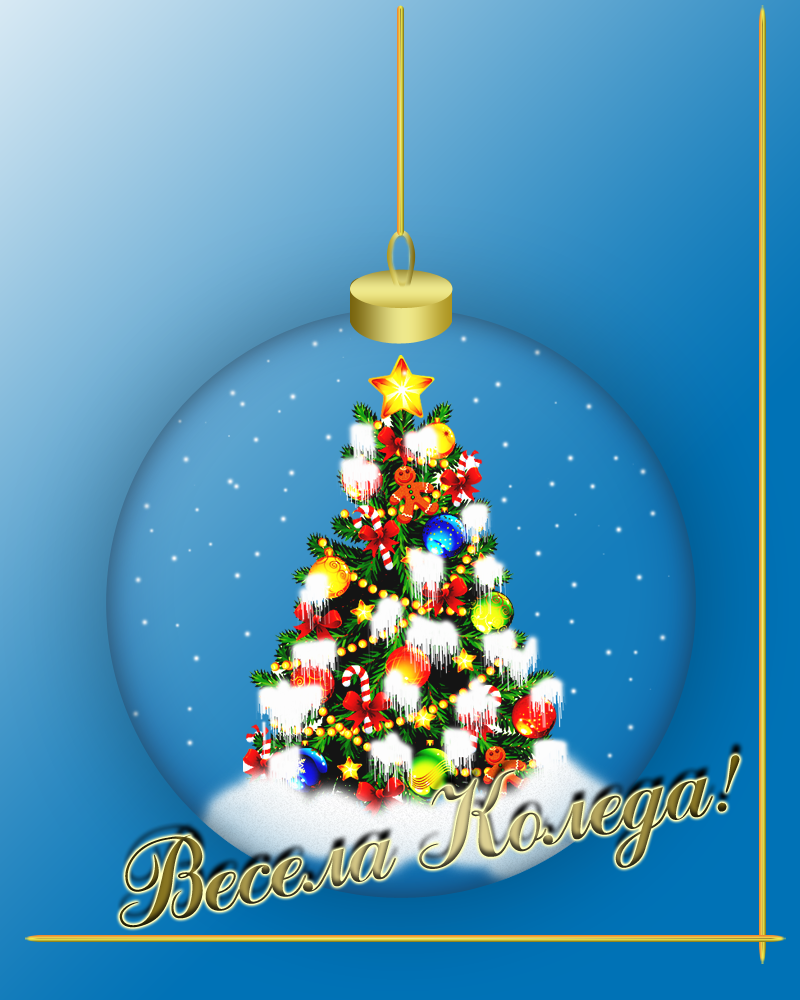
<style>
.page{position:relative;width:800px;height:1000px}
.page>*{position:absolute;margin:0}
.t1{font:120px "ArtScript"}
</style>
<div class="page">
<p class="t1" style="left:119px;top:755px;width:621px;height:173px;rotate:-11deg">Весела Коледа!</p>
</div>
